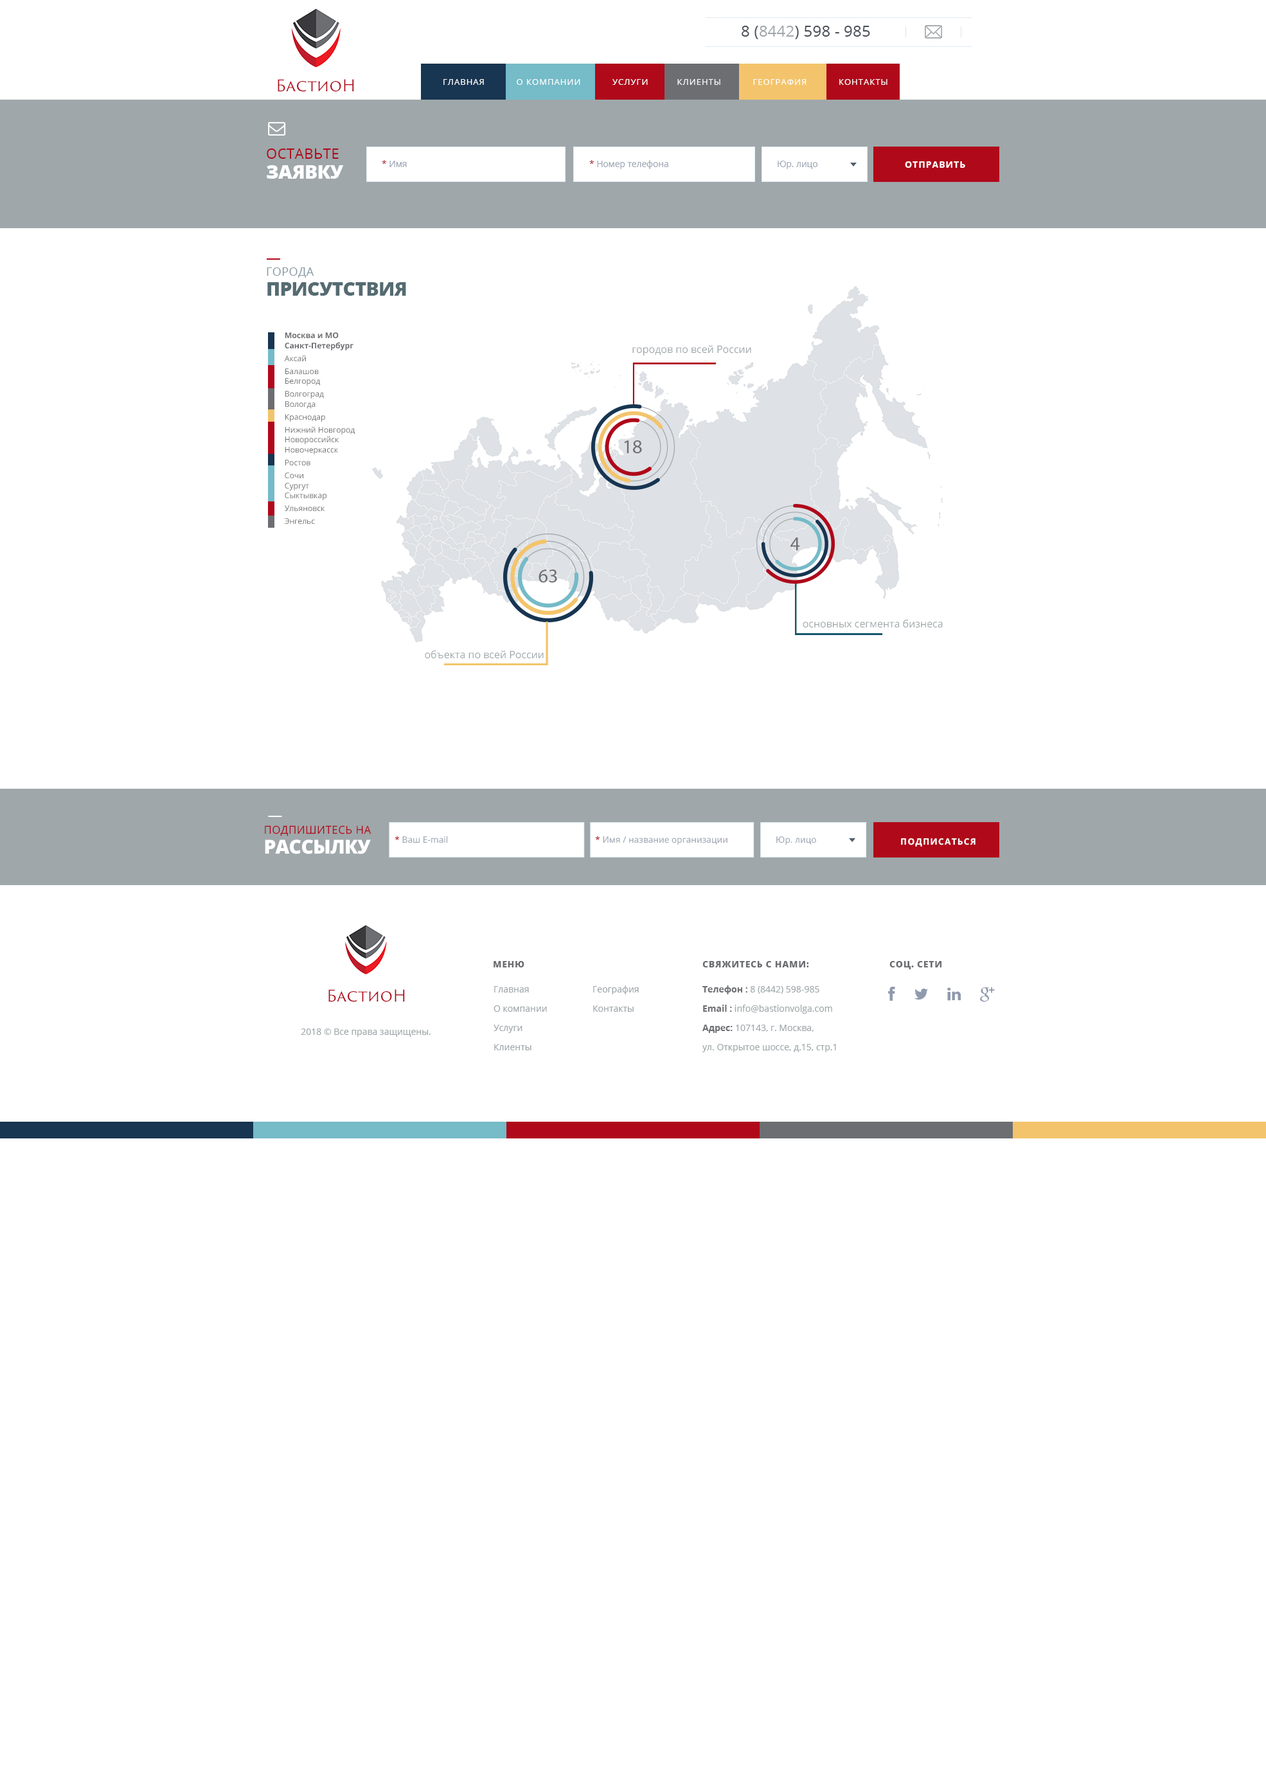
<style>
.page{position:relative;width:1266px;height:1787px;background:#ffffff}
.page>*{position:absolute;margin:0}
.t1{font:15.4px "OpenSans";letter-spacing:0.01em;color:#484e57}
.t2{font:15.4px "OpenSans";letter-spacing:0.01em;color:#9fa7aa}
.t3{font:15.7px "TrajanSansPro-Regular";color:#af091a}
.t4{font:8.4px "OpenSans";letter-spacing:0.08em;color:#fefefe;text-transform:uppercase}
.t5{font:14.1px/19.9px "OpenSans";letter-spacing:0.025em;color:#af091a;text-transform:uppercase}
.t6{font:19.3px/19.9px "OpenSans-Extrabold";letter-spacing:-0.025em;color:#ffffff;text-transform:uppercase}
.t7{font:8.7px "OpenSans";letter-spacing:0.01em;color:#a0a9b6}
.t8{font:8.7px "OpenSans";letter-spacing:0.01em;color:#af091a}
.t9{font:8.7px "OpenSans-Bold";letter-spacing:0.1em;color:#ffffff;text-transform:uppercase}
.t10{font:19.3px/19.9px "OpenSans-Extrabold";letter-spacing:-0.025em;color:#556b72;text-transform:uppercase}
.t11{font:11.6px/19.9px "OpenSans";letter-spacing:0.025em;color:#859aa1;text-transform:uppercase}
.t12{font:7.9px/10px "OpenSans-Bold";color:#6d6e72}
.t13{font:7.9px/12.9px "OpenSans";color:#6d6e72}
.t14{font:7.9px/10px "OpenSans";color:#6d6e72}
.t15{font:10.3px "OpenSans";color:#9fa7aa}
.t16{font:19.4px "MyriadPro-Regular";color:#6d6e72}
.t17{font:10.9px/19.9px "OpenSans";letter-spacing:0.025em;color:#af091a;text-transform:uppercase}
.t18{font:9px "OpenSans-Extrabold";letter-spacing:0.05em;color:#6d6e72;text-transform:uppercase}
.t19{font:9px/19.3px "OpenSans";color:#9fa7aa}
.t20{font:9px/19.3px "OpenSans-Bold";color:#6d6e72}
.t21{font:9px "OpenSans";color:#9fa7aa}
</style>
<div class="page">
<p class="t1" style="left:742px;top:26px;width:128px;height:13px">8 (<span class="t2">8442</span>) 598 - 985</p>
<p class="t3" style="left:278px;top:79px;width:76px;height:13px">БастиоН</p>
<p class="t4" style="left:444px;top:79px;width:444px;height:6px">Главная           О КОМПАНИИ           УСЛУГИ          КЛИЕНТЫ           География           КОНТАКТЫ</p>
<p class="t4" style="left:444px;top:79px;width:444px;height:6px">Главная           О КОМПАНИИ           УСЛУГИ          КЛИЕНТЫ           География           КОНТАКТЫ</p>
<p class="t5" style="left:267px;top:148px;width:77px;height:31px">оставьте <br><span class="t6">ЗАЯВКУ</span></p>
<p class="t7" style="left:382px;top:160px;width:25px;height:7px"><span class="t8">* </span>Имя</p>
<p class="t7" style="left:590px;top:160px;width:79px;height:9px"><span class="t8">* </span>Номер телефона</p>
<p class="t7" style="left:778px;top:161px;width:40px;height:8px">Юр. лицо</p>
<p class="t9" style="left:905px;top:161px;width:61px;height:7px">ОТПРАВИТЬ</p>
<p class="t10" style="left:267px;top:267px;width:139px;height:29px"><span class="t11">города<br></span>присутствия</p>
<p class="t12" style="left:284px;top:332px;width:71px;height:192px">Москва и МО<br>Санкт-Петербург<br><span class="t13">Аксай<br>Балашов<br></span><span class="t14">Белгород<br></span><span class="t13">Волгоград<br></span><span class="t14">Вологда<br></span><span class="t13">Краснодар<br>Нижний Новгород<br></span><span class="t14">Новороссийск<br>Новочеркасск<br></span><span class="t13">Ростов<br>Сочи<br></span><span class="t14">Сургут<br>Сыктывкар<br></span><span class="t13">Ульяновск<br>Энгельс</span></p>
<p class="t15" style="left:633px;top:345px;width:119px;height:11px">городов по всей России</p>
<p class="t16" style="left:624px;top:440px;width:18px;height:14px">18</p>
<p class="t16" style="left:791px;top:537px;width:9px;height:13px">4</p>
<p class="t16" style="left:539px;top:570px;width:18px;height:13px">63</p>
<p class="t15" style="left:803px;top:619px;width:140px;height:9px">основных сегмента бизнеса</p>
<p class="t15" style="left:425px;top:650px;width:119px;height:9px">объекта по всей России</p>
<p class="t17" style="left:265px;top:825px;width:107px;height:29px">подпишитесь на<br><span class="t6">рассылку</span></p>
<p class="t7" style="left:395px;top:836px;width:53px;height:7px"><span class="t8">* </span>Ваш E-mail</p>
<p class="t7" style="left:595px;top:836px;width:133px;height:9px"><span class="t8">* </span>Имя / название организации</p>
<p class="t7" style="left:777px;top:836px;width:39px;height:9px">Юр. лицо</p>
<p class="t9" style="left:901px;top:838px;width:75px;height:9px">подписаться</p>
<p class="t18" style="left:494px;top:961px;width:31px;height:7px">меню</p>
<p class="t18" style="left:703px;top:961px;width:106px;height:7px">свяжитесь с нами:</p>
<p class="t18" style="left:890px;top:961px;width:52px;height:8px">соц. сети</p>
<p class="t3" style="left:328px;top:989px;width:77px;height:13px">БастиоН</p>
<p class="t19" style="left:494px;top:986px;width:53px;height:64px">Главная<br>О компании<br>Услуги<br>Клиенты</p>
<p class="t19" style="left:593px;top:986px;width:46px;height:26px">География<br>Контакты</p>
<p class="t19" style="left:703px;top:986px;width:133px;height:66px"><span class="t20">Телефон : </span>8 (8442) 598-985<br><span class="t20">Email : </span>info@bastionvolga.com<br><span class="t20">Адрес: </span>107143, г. Москва,<br>ул. Открытое шоссе, д.15, стр.1</p>
<p class="t21" style="left:301px;top:1029px;width:130px;height:8px">2018 © Все права защищены.</p>
</div>
